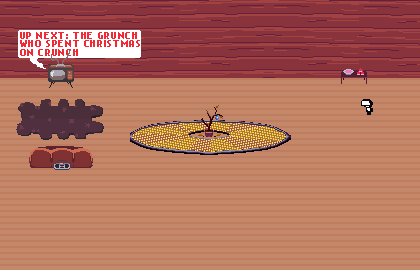
<style>
.page{position:relative;width:420px;height:270px;background:#c38869}
.page>*{position:absolute;margin:0}
.t1{font:8.3px/8.3px "NokiaCellphoneFC-Small";letter-spacing:0.075em;color:#f02935}
</style>
<div class="page">
<p class="t1" style="left:20px;top:32px;width:120px;height:24px">UP NEXT: THE GRUNCH<br>WHO SPENT CHRISTMAS<br>ON CRUNCH</p>
</div>
